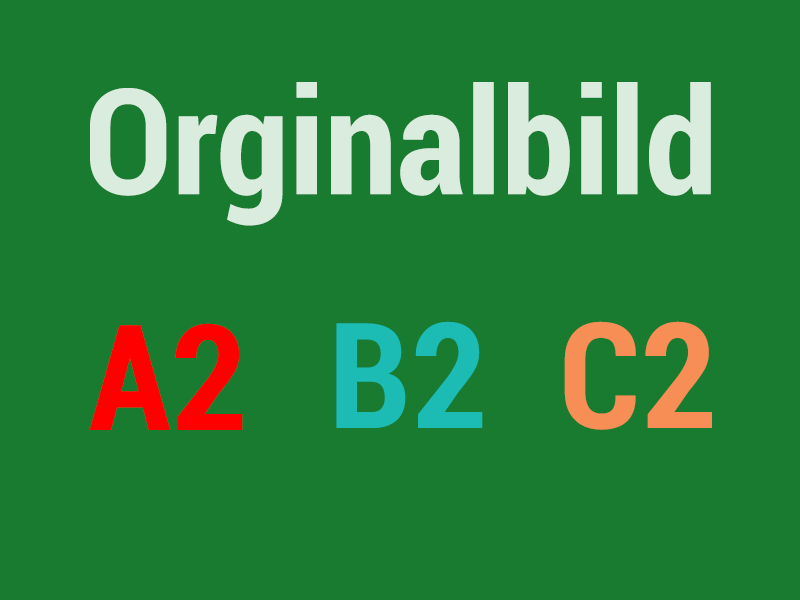
<style>
.page{position:relative;width:800px;height:600px;background:#197b30}
.page>*{position:absolute;margin:0}
.t1{font:147px "Roboto-BoldCondensed";color:#d9ecde}
.t2{font:147px "Roboto-BoldCondensed";color:#ff0000}
.t3{font:147px "Roboto-BoldCondensed";color:#1cbbb4}
.t4{font:147px "Roboto-BoldCondensed";color:#f68e56}
</style>
<div class="page">
<p class="t1" style="left:90px;top:82px;width:621px;height:144px">Orginalbild</p>
<p class="t2" style="left:89px;top:323px;width:154px;height:107px">A2</p>
<p class="t3" style="left:336px;top:321px;width:147px;height:107px">B2</p>
<p class="t4" style="left:564px;top:321px;width:148px;height:109px">C2</p>
</div>
